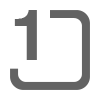
<style>
.page{position:relative;width:100px;height:100px;background:#ffffff}
.page>*{position:absolute;margin:0}
.t1{font:71px "Helvetica-Bold";color:#636363}
</style>
<div class="page">
<p class="t1" style="left:14px;top:10px;width:23px;height:50px">1</p>
</div>
